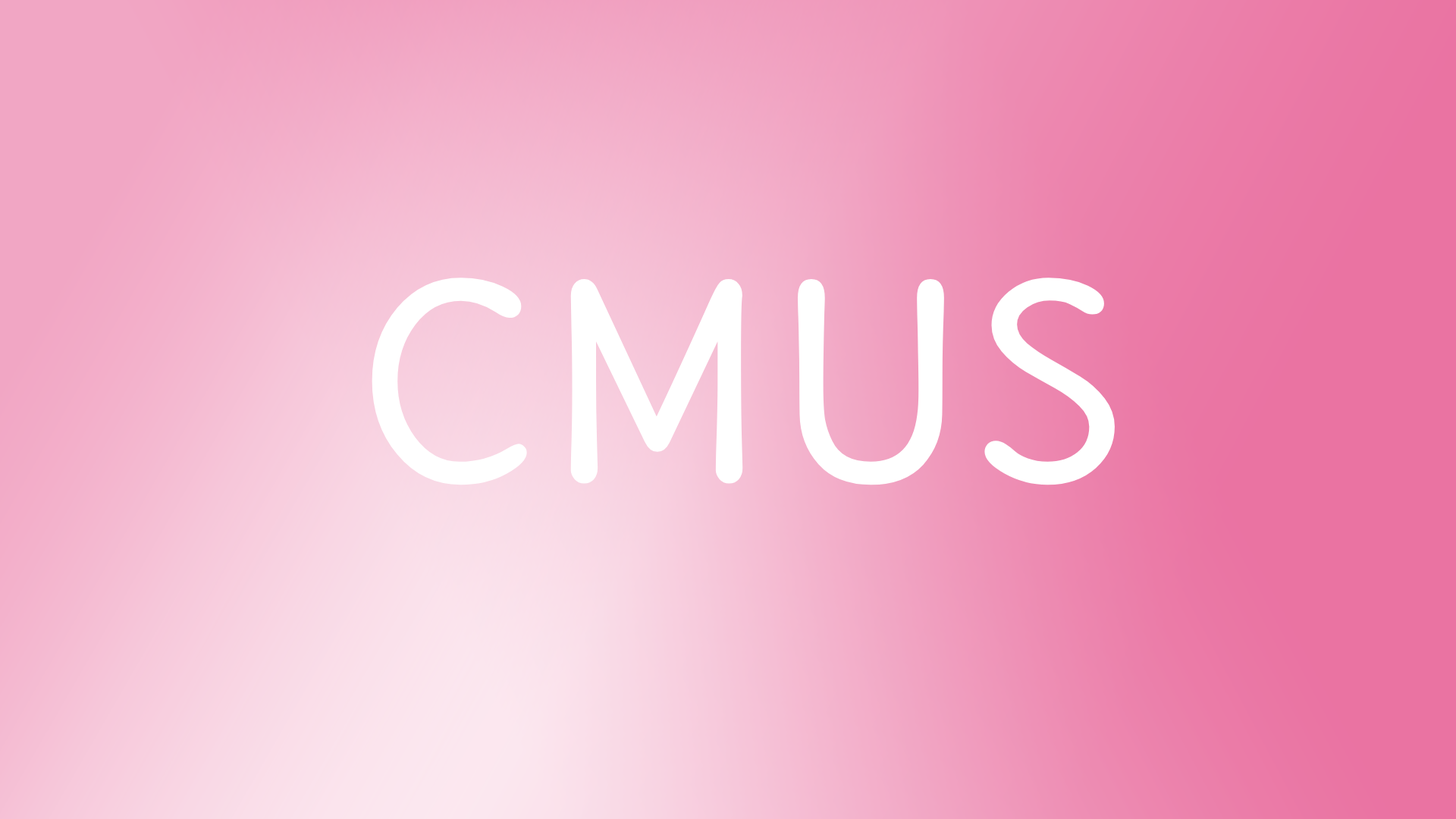
<style>
.page{position:relative;width:1456px;height:819px}
.page>*{position:absolute;margin:0}
.t1{font:265.4px "DeliusUnicase-Regular";color:#ffffff}
</style>
<div class="page">
<p class="t1" style="left:372px;top:278px;width:743px;height:207px">CMUS</p>
</div>
